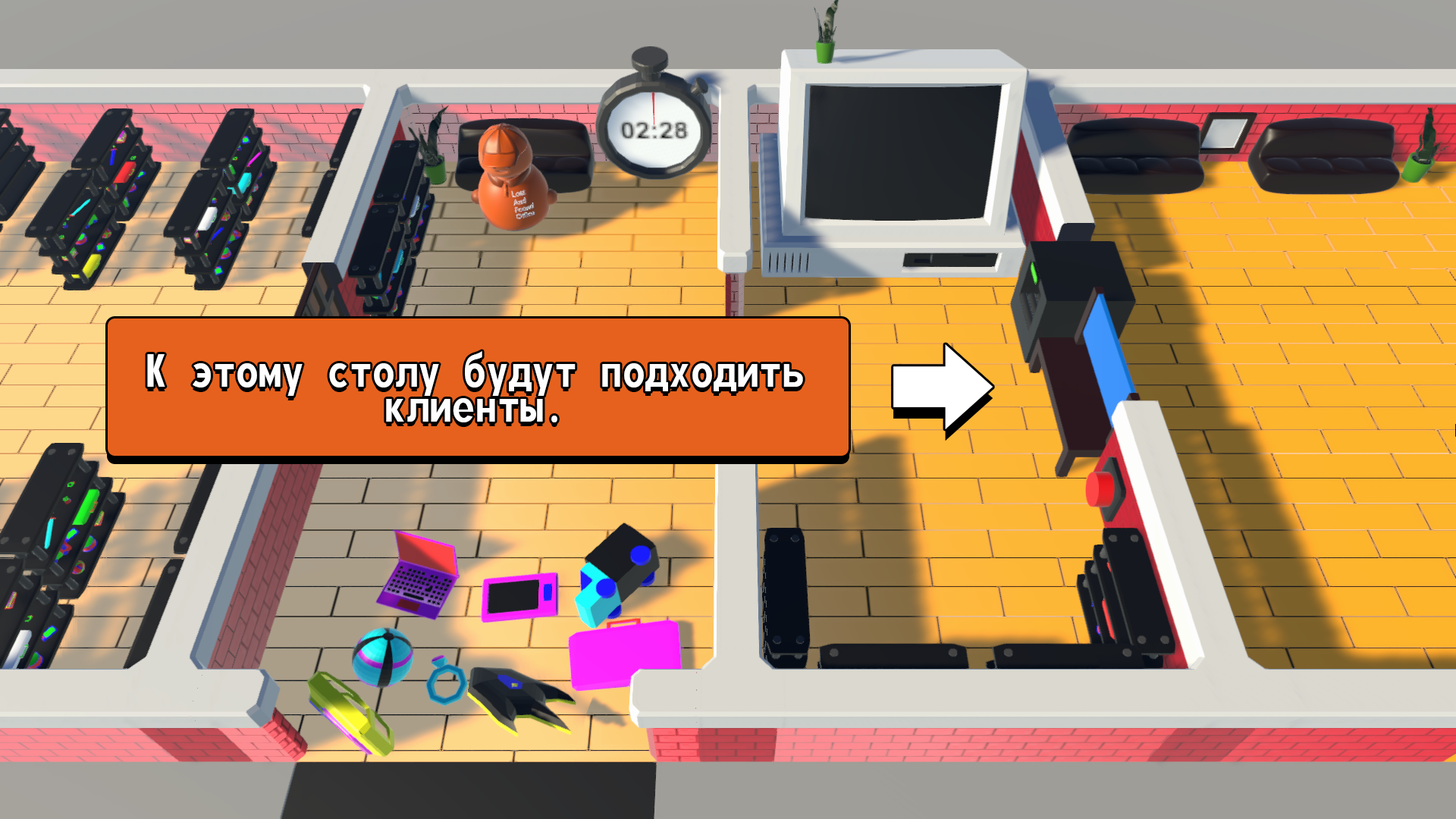
<style>
.page{position:relative;width:1456px;height:819px}
.page>*{position:absolute;margin:0}
.t1{font:56.9px/34.8px "MonofontoRUSBYMelman-Regular";color:#fdfefd}
</style>
<div class="page">
<p class="t1" style="left:147px;top:351px;width:656px;height:71px;text-align:center">К этому столу будут подходить<br>клиенты.</p>
</div>
